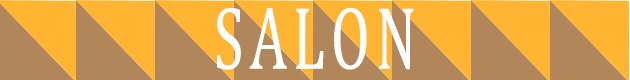
<style>
.page{position:relative;width:630px;height:80px;background:#ffb432}
.page>*{position:absolute;margin:0}
.t1{font:90px "Cambria";letter-spacing:0.1em;color:#ffffff;scale:0.67 1}
</style>
<div class="page">
<p class="t1" style="left:217px;top:8px;width:197px;height:62px">SALON</p>
</div>
